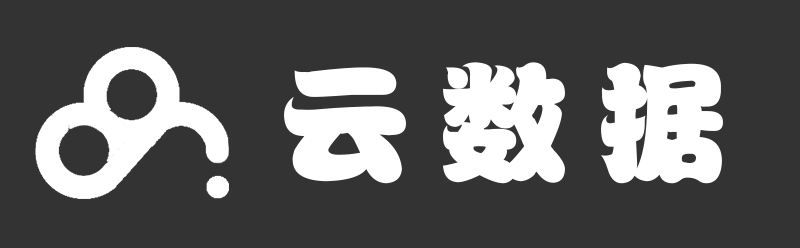
<style>
.page{position:relative;width:800px;height:248px;background:#333333}
.page>*{position:absolute;margin:0}
.t1{font:130px "FZPWK--GBK1-0";letter-spacing:0.22em;color:#ffffff}
</style>
<div class="page">
<p class="t1" style="left:284px;top:62px;width:439px;height:122px">云数据</p>
</div>
